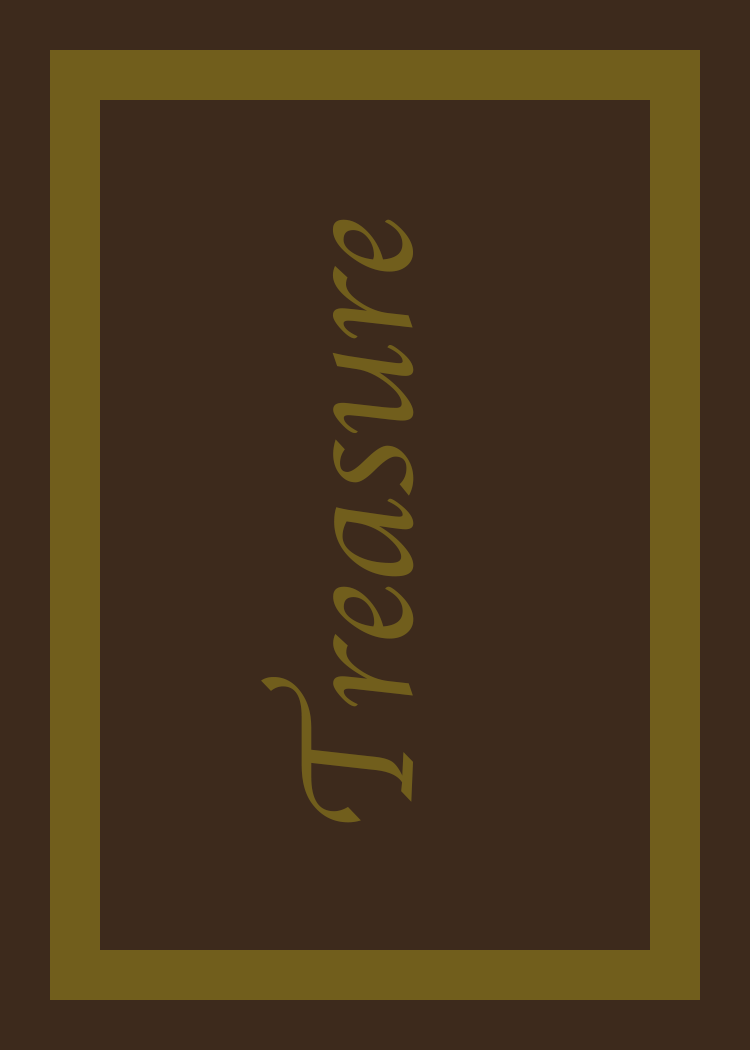
<style>
.page{position:relative;width:750px;height:1050px;background:#3d2a1c}
.page>*{position:absolute;margin:0}
.t1{font:166.7px "Apple-Chancery";color:#715e1c}
</style>
<div class="page">
<p class="t1" style="left:261px;top:219px;width:153px;height:604px;rotate:-90deg">Treasure</p>
</div>
